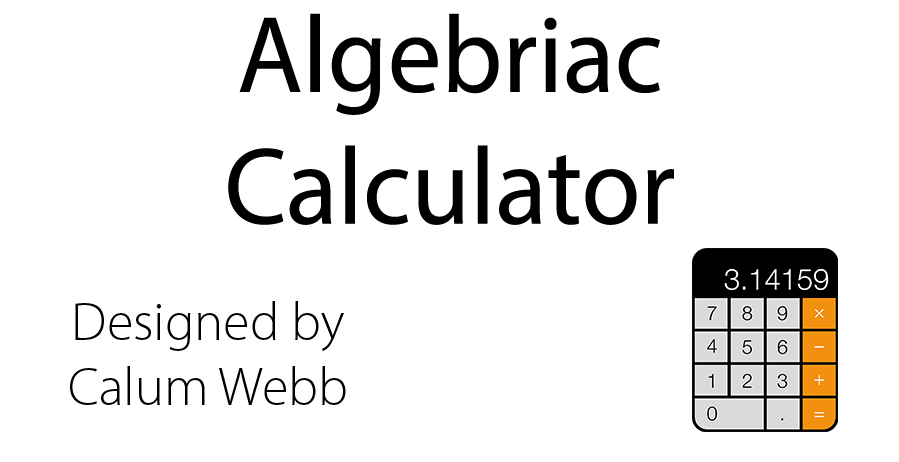
<style>
.page{position:relative;width:899px;height:462px;background:#ffffff}
.page>*{position:absolute;margin:0}
.t1{font:109.8px "MyriadPro-Regular";color:#000000}
.t2{font:54.2px "MyriadPro-Light";color:#000000}
</style>
<div class="page">
<p class="t1" style="left:228px;top:13px;width:446px;height:212px;text-align:center">Algebriac <br>Calculator<br>v1</p>
<p class="t2" style="left:70px;top:301px;width:276px;height:104px;text-align:center">Designed by<br>Calum Webb</p>
</div>
